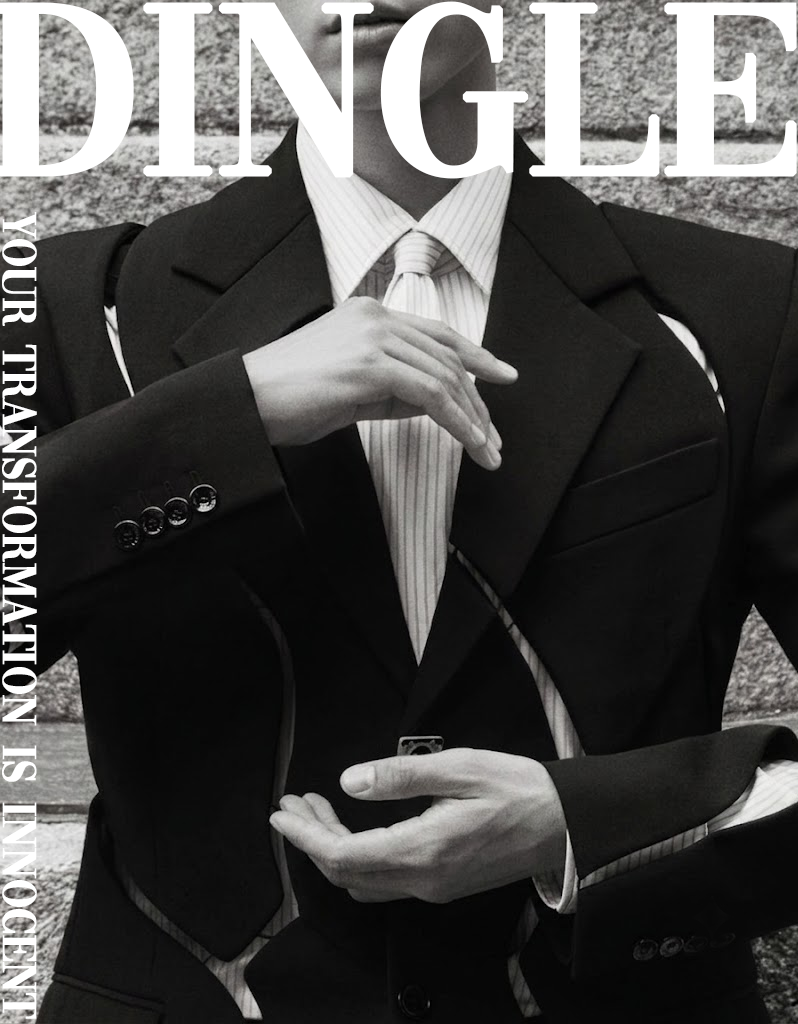
<style>
.page{position:relative;width:798px;height:1024px}
.page>*{position:absolute;margin:0}
.t1{font:49px/20px "Vogue-Regular";letter-spacing:-0.025em;color:#ffffff;font-weight:bold}
</style>
<div class="page">
<p class="t1" style="left:2px;top:212px;width:35px;height:807px">Your transformation is innocent</p>
</div>
